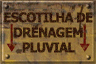
<style>
.page{position:relative;width:96px;height:64px}
.page>*{position:absolute;margin:0}
.t1{font:13.3px/15px "Tahoma-Bold";letter-spacing:-0.04em;color:#361c0a;text-transform:uppercase;scale:0.96 1}
</style>
<div class="page">
<p class="t1" style="left:4px;top:12px;width:89px;height:41px;text-align:center">escotilha de<br>drenagem<br>pLuvial</p>
</div>
